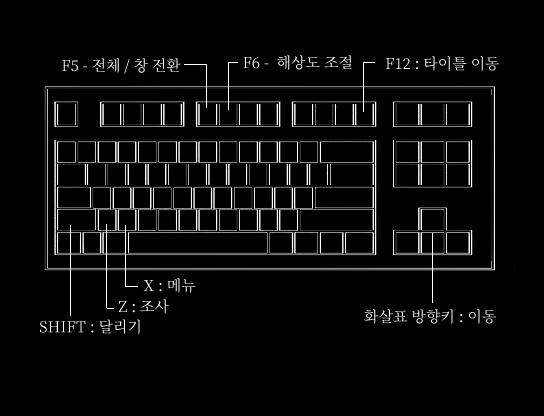
<style>
.page{position:relative;width:544px;height:416px;background:#000000}
.page>*{position:absolute;margin:0}
.t1{font:15px "NotoSerifCJKkr-Regular";color:#ffffff}
</style>
<div class="page">
<p class="t1" style="left:62px;top:58px;width:119px;height:16px">F5 - 전체 / 창 전환</p>
<p class="t1" style="left:243px;top:55px;width:109px;height:15px">F6 -  해상도 조절</p>
<p class="t1" style="left:386px;top:56px;width:113px;height:15px">F12 : 타이틀 이동</p>
<p class="t1" style="left:143px;top:278px;width:53px;height:15px">X : 메뉴</p>
<p class="t1" style="left:118px;top:299px;width:51px;height:15px">Z : 조사</p>
<p class="t1" style="left:364px;top:309px;width:132px;height:15px">화살표 방향키 : 이동</p>
<p class="t1" style="left:40px;top:319px;width:100px;height:15px">SHIFT : 달리기</p>
</div>
